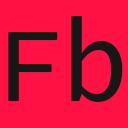
<style>
.page{position:relative;width:128px;height:128px;background:#ff1243}
.page>*{position:absolute;margin:0}
.t1{font:110.1px "LucidaConsole";color:#171716}
</style>
<div class="page">
<p class="t1" style="left:8px;top:16px;width:115px;height:86px">Fb</p>
</div>
